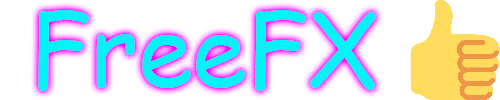
<style>
.page{position:relative;width:500px;height:100px;background:#ffffff}
.page>*{position:absolute;margin:0}
.t1{font:100px "ComicSansMS";letter-spacing:-0.004em;color:#00f4f5}
</style>
<div class="page">
<p class="t1" style="left:38px;top:10px;width:338px;height:81px">FreeFX</p>
</div>
